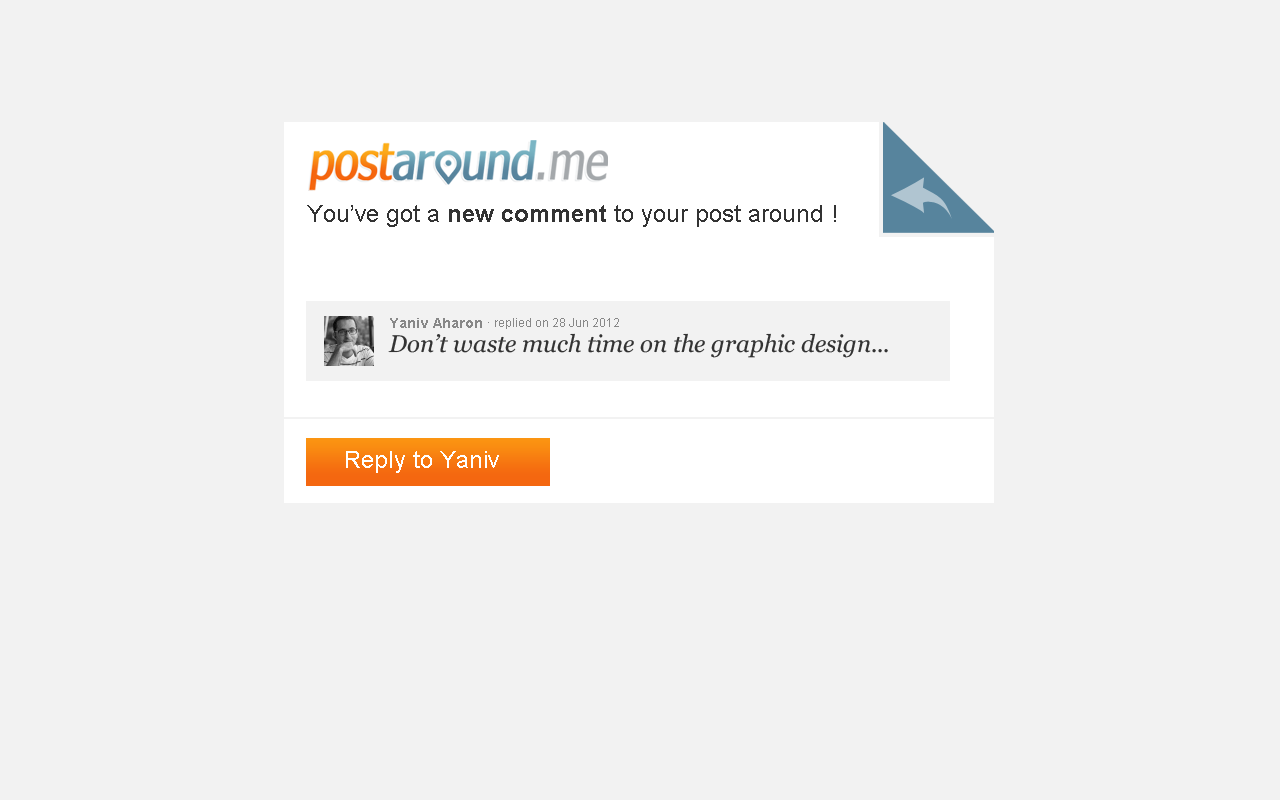
<style>
.page{position:relative;width:1280px;height:800px;background:#f2f2f2}
.page>*{position:absolute;margin:0}
.t1{font:24px "ArialMT";color:#333333}
.t2{font:24px "Arial-BoldMT";color:#333333}
.t3{font:14px "Arial-BoldMT";color:#888888}
.t4{font:12px "ArialMT";color:#888888}
.t5{font:24px "Georgia-Italic";color:#333333}
.t6{font:24px "ArialMT";color:#ffffff}
</style>
<div class="page">
<p class="t1" style="left:307px;top:205px;width:529px;height:22px">You’ve got a <span class="t2">new comment </span>to your post around !</p>
<p class="t3" style="left:390px;top:318px;width:92px;height:10px">Yaniv Aharon</p>
<p class="t4" style="left:488px;top:318px;width:131px;height:11px">· replied on 28 Jun 2012</p>
<p class="t5" style="left:388px;top:333px;width:500px;height:25px">Don’t waste much time on the graphic design...</p>
<p class="t6" style="left:346px;top:451px;width:153px;height:22px">Reply to Yaniv</p>
</div>
